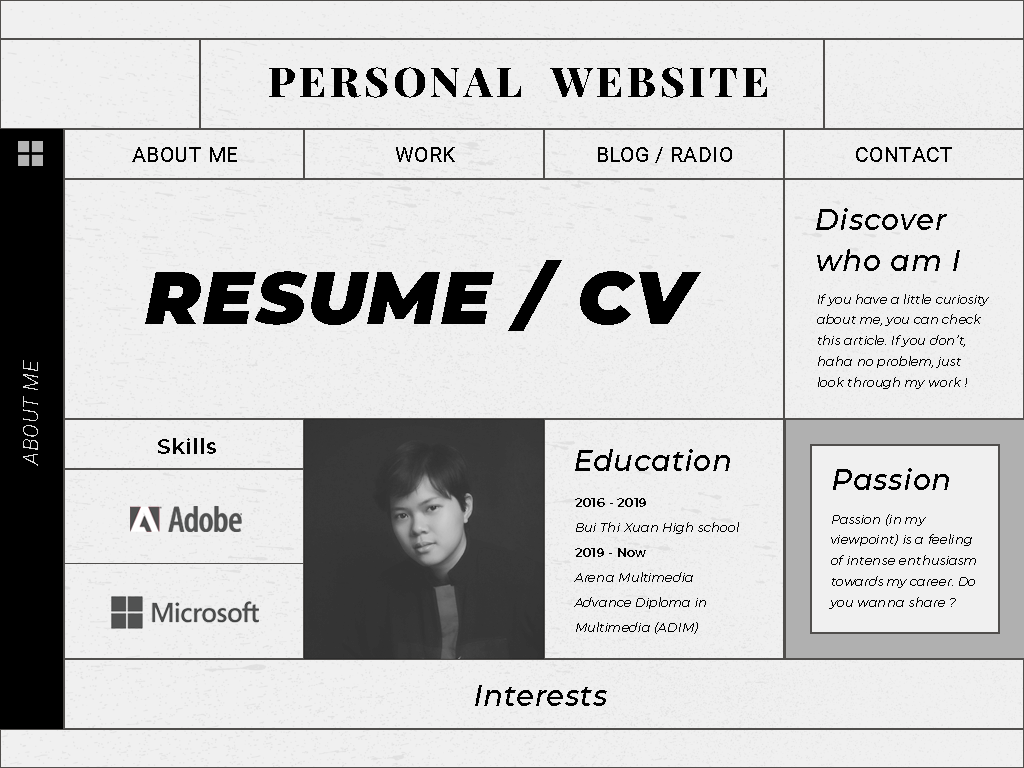
<style>
.page{position:relative;width:1024px;height:768px;background:#f0f0f0}
.page>*{position:absolute;margin:0}
.t1{font:41.7px "PlayfairDisplay-ExtraBold";letter-spacing:0.1em;color:#000000}
.t2{font:20.8px "Roboto-Regular";letter-spacing:0.025em;color:#000000}
.t3{font:29.2px/41.7px "Montserrat-MediumItalic";letter-spacing:0.025em;color:#000000}
.t4{font:75px "Montserrat-BlackItalic";letter-spacing:0.025em;color:#000000}
.t5{font:12.5px/20.8px "Montserrat-LightItalic";letter-spacing:0.025em;color:#000000}
.t6{font:20.8px "Roboto-LightItalic";letter-spacing:0.025em;color:#dddddd}
.t7{font:20.8px "Montserrat-SemiBold";letter-spacing:0.025em;color:#000000}
.t8{font:29.2px "Montserrat-MediumItalic";letter-spacing:0.025em;color:#000000}
.t9{font:12.5px/25px "Montserrat-LightItalic";letter-spacing:0.025em;color:#000000}
.t10{font:12.5px/25px "Montserrat-SemiBold";letter-spacing:0.025em;color:#000000}
</style>
<div class="page">
<p class="t1" style="left:269px;top:67px;width:498px;height:31px">PERSONAL  WEBSITE</p>
<p class="t2" style="left:132px;top:147px;width:105px;height:15px">ABOUT ME</p>
<p class="t2" style="left:396px;top:147px;width:59px;height:15px">WORK</p>
<p class="t2" style="left:598px;top:147px;width:134px;height:16px">BLOG / RADIO</p>
<p class="t2" style="left:856px;top:147px;width:96px;height:15px">CONTACT</p>
<p class="t3" style="left:816px;top:208px;width:144px;height:63px">Discover<br>who am I</p>
<p class="t4" style="left:145px;top:260px;width:556px;height:71px">RESUME / CV</p>
<p class="t5" style="left:817px;top:294px;width:172px;height:95px">If you have a little curiosity about me, you can check this article. If you don’t, haha no problem, just look through my work !</p>
<p class="t6" style="left:23px;top:360px;width:15px;height:106px;rotate:-90deg">ABOUT ME</p>
<p class="t7" style="left:158px;top:438px;width:58px;height:16px">Skills</p>
<p class="t8" style="left:575px;top:449px;width:155px;height:22px">Education</p>
<p class="t8" style="left:833px;top:468px;width:116px;height:22px">Passion</p>
<p class="t9" style="left:574px;top:498px;width:165px;height:136px"><span class="t10">2016 - 2019<br></span>Bui Thi Xuan High school<br><span class="t10">2019 - Now<br></span>Arena Multimedia<br>Advance Diploma in Multimedia (ADIM)</p>
<p class="t5" style="left:829px;top:514px;width:147px;height:95px">Passion (in my viewpoint) is a feeling of intense enthusiasm towards my career. Do you wanna share ?</p>
<p class="t8" style="left:475px;top:685px;width:132px;height:21px">Interests</p>
</div>
